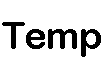
<style>
.page{position:relative;width:104px;height:69px;background:#ffffff}
.page>*{position:absolute;margin:0}
.t1{font:37.5px "ArialRoundedMTBold";color:#000000}
</style>
<div class="page">
<p class="t1" style="left:2px;top:22px;width:99px;height:35px">Temp</p>
</div>
